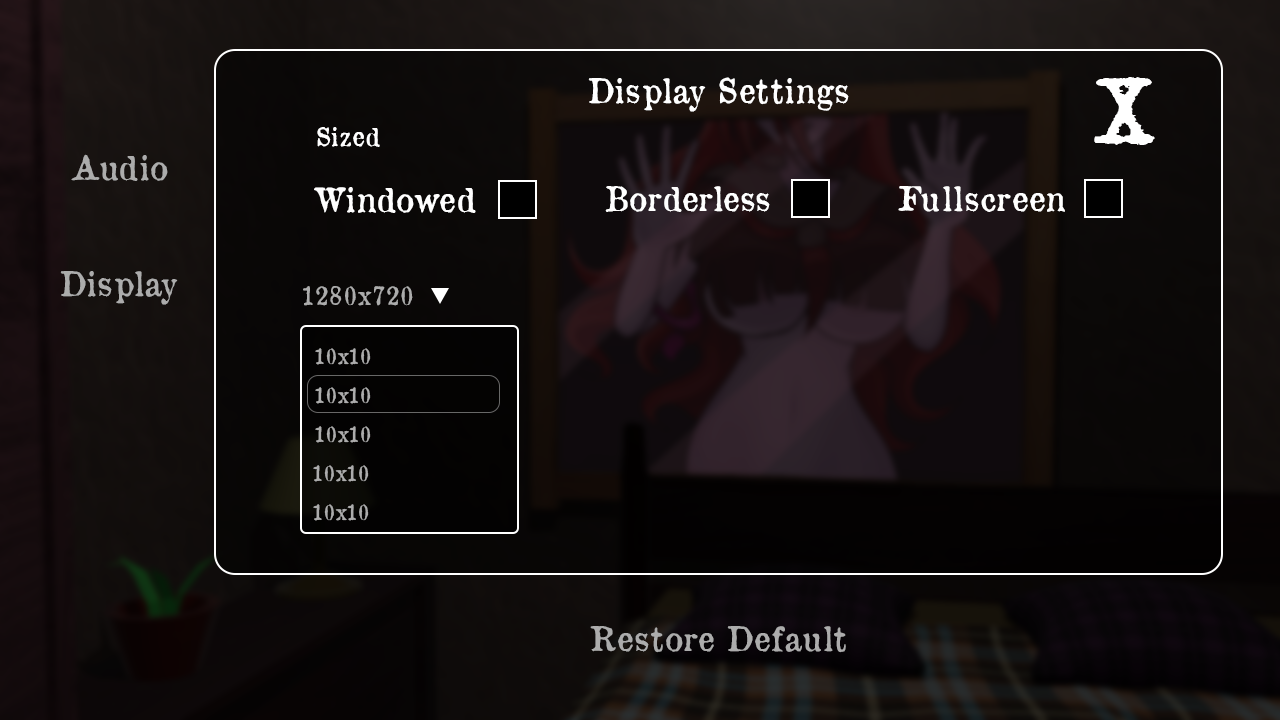
<style>
.page{position:relative;width:1280px;height:720px}
.page>*{position:absolute;margin:0}
.t1{font:33.3px "OldNewspaperTypes";color:#ffffff}
.t2{font:83.3px "MomsTypewriter";color:#ffffff}
.t3{font:25px "OldNewspaperTypes";color:#ffffff}
.t4{font:33.3px "OldNewspaperTypes";color:#acacac}
.t5{font:25px "OldNewspaperTypes";color:#acacac}
.t6{font:20.8px "OldNewspaperTypes";color:#acacac}
</style>
<div class="page">
<p class="t1" style="left:588px;top:77px;width:261px;height:35px">Display Settings</p>
<p class="t2" style="left:1094px;top:77px;width:61px;height:68px">X</p>
<p class="t3" style="left:317px;top:127px;width:63px;height:20px">Sized</p>
<p class="t4" style="left:71px;top:154px;width:97px;height:27px">Audio</p>
<p class="t1" style="left:314px;top:187px;width:162px;height:26px">Windowed</p>
<p class="t1" style="left:605px;top:186px;width:165px;height:26px">Borderless</p>
<p class="t1" style="left:898px;top:186px;width:167px;height:26px">Fullscreen</p>
<p class="t4" style="left:60px;top:271px;width:118px;height:34px">Display</p>
<p class="t5" style="left:303px;top:286px;width:110px;height:20px">1280x720</p>
<p class="t6" style="left:315px;top:348px;width:56px;height:17px">10x10</p>
<p class="t6" style="left:315px;top:387px;width:56px;height:17px">10x10</p>
<p class="t6" style="left:315px;top:426px;width:56px;height:17px">10x10</p>
<p class="t6" style="left:313px;top:465px;width:56px;height:17px">10x10</p>
<p class="t6" style="left:313px;top:504px;width:56px;height:17px">10x10</p>
<p class="t4" style="left:590px;top:626px;width:256px;height:27px">Restore Default</p>
</div>
